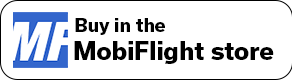
<style>
.page{position:relative;width:292px;height:80px;background:#ffffff}
.page>*{position:absolute;margin:0}
.t1{font:18px "Usual-ExtraBold";color:#000000}
.t2{font:24px "Usual-ExtraBold";color:#000000}
</style>
<div class="page">
<p class="t1" style="left:75px;top:18px;width:90px;height:17px">Buy in the</p>
<p class="t2" style="left:74px;top:41px;width:200px;height:23px">MobiFlight store</p>
</div>
